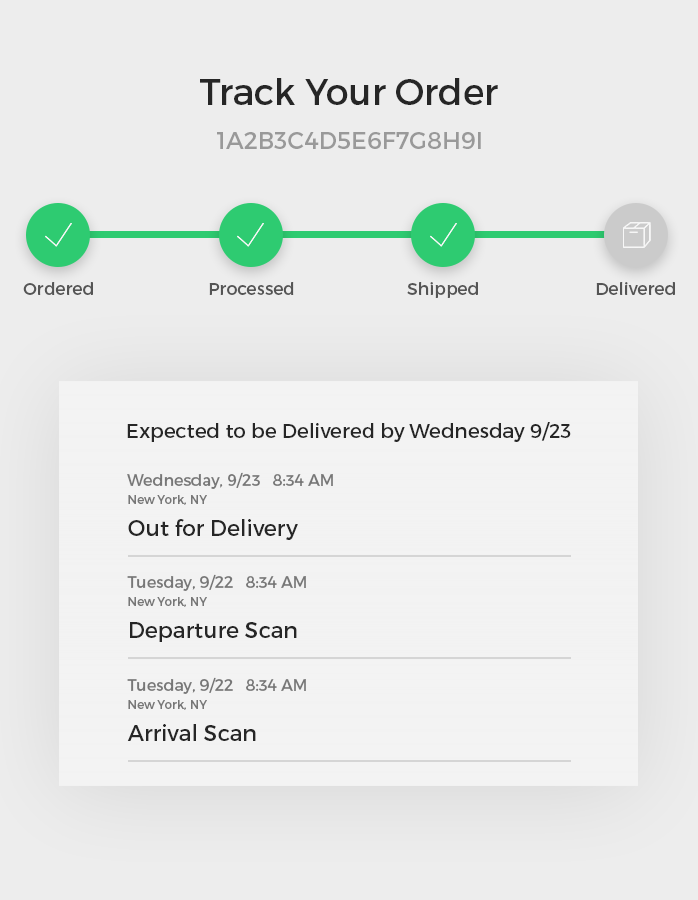
<style>
.page{position:relative;width:698px;height:900px;background:#f3f3f3}
.page>*{position:absolute;margin:0}
.t1{font:36px "Montserrat-Regular";color:#262626}
.t2{font:24px "Montserrat-Regular";color:#999999}
.t3{font:17.2px "Montserrat-Regular";color:#555555}
.t4{font:20px "Montserrat-Regular";color:#262626}
.t5{font:16px "Montserrat-Regular";color:#777777}
.t6{font:12px "Montserrat-Regular";color:#777777}
.t7{font:22px "Montserrat-Regular";color:#262626}
</style>
<div class="page">
<p class="t1" style="left:200px;top:78px;width:298px;height:27px">Track Your Order</p>
<p class="t2" style="left:217px;top:132px;width:264px;height:17px">1A2B3C4D5E6F7G8H9I</p>
<p class="t3" style="left:23px;top:282px;width:70px;height:13px">Ordered</p>
<p class="t3" style="left:209px;top:282px;width:85px;height:13px">Processed</p>
<p class="t3" style="left:407px;top:282px;width:71px;height:16px">Shipped</p>
<p class="t3" style="left:596px;top:282px;width:79px;height:13px">Delivered</p>
<p class="t4" style="left:127px;top:422px;width:444px;height:20px">Expected to be Delivered by Wednesday 9/23</p>
<p class="t5" style="left:127px;top:472px;width:133px;height:17px">Wednesday, 9/23</p>
<p class="t5" style="left:273px;top:474px;width:60px;height:12px">8:34 AM</p>
<p class="t6" style="left:128px;top:495px;width:79px;height:10px">New York, NY</p>
<p class="t7" style="left:128px;top:519px;width:170px;height:21px">Out for Delivery</p>
<p class="t5" style="left:127px;top:574px;width:106px;height:17px">Tuesday, 9/22</p>
<p class="t5" style="left:246px;top:576px;width:60px;height:12px">8:34 AM</p>
<p class="t6" style="left:128px;top:597px;width:79px;height:10px">New York, NY</p>
<p class="t7" style="left:130px;top:622px;width:167px;height:20px">Departure Scan</p>
<p class="t5" style="left:127px;top:677px;width:106px;height:17px">Tuesday, 9/22</p>
<p class="t5" style="left:246px;top:679px;width:60px;height:12px">8:34 AM</p>
<p class="t6" style="left:128px;top:700px;width:79px;height:10px">New York, NY</p>
<p class="t7" style="left:127px;top:724px;width:129px;height:17px">Arrival Scan</p>
</div>
